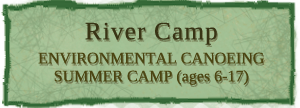
<style>
.page{position:relative;width:300px;height:108px}
.page>*{position:absolute;margin:0}
.t1{font:16px/18px "Tinos";color:#4b4512}
.t2{font:25px "Tinos";letter-spacing:0.05em;color:#383415}
.t3{font:16px/24px "Tinos";color:#4b4512}
</style>
<div class="page">
<p class="t1" style="left:38px;top:22px;width:226px;height:63px;text-align:center"><span class="t2">River Camp<br></span><span class="t3">ENVIRONMENTAL CANOEING<br></span>SUMMER CAMP (ages 6-17)</p>
</div>
